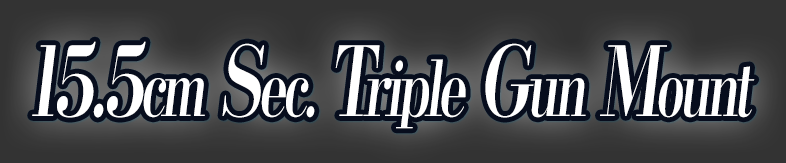
<style>
.page{position:relative;width:786px;height:163px}
.page>*{position:absolute;margin:0}
.t1{font:76.8px "KochoStd-Heavy";letter-spacing:-0.08em;color:#ffffff;font-style:italic;scale:0.68 1}
.t2{font:96px "KochoStd-Heavy";letter-spacing:-0.08em;color:#ffffff;font-style:italic;scale:0.68 1}
</style>
<div class="page">
<p class="t1" style="left:32px;top:41px;width:723px;height:88px"><span class="t2">15.5</span>cm<span class="t2"> S</span>ec.<span class="t2"> T</span>riple<span class="t2"> G</span>un<span class="t2"> M</span>ount</p>
</div>
